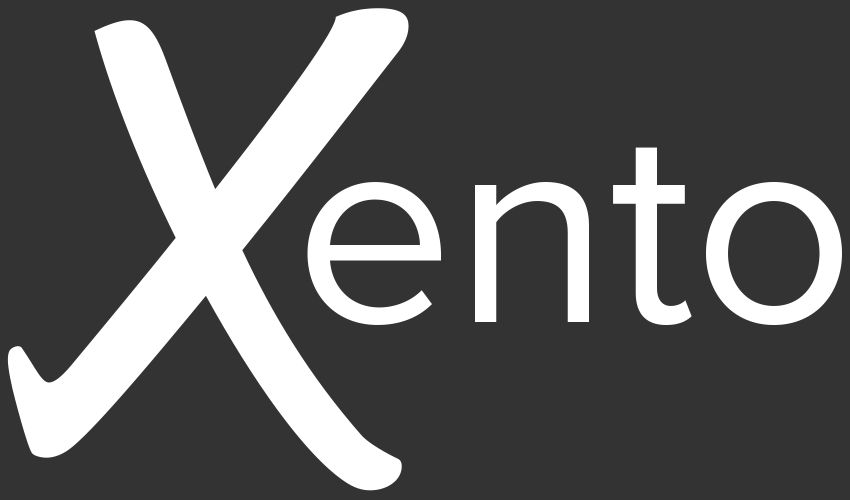
<style>
.page{position:relative;width:850px;height:500px;background:#333333}
.page>*{position:absolute;margin:0}
.t1{font:615.7px "Feltro-Normal";color:#ffffff}
.t2{font:283.5px "ProximaNova-Regular";color:#ffffff}
</style>
<div class="page">
<p class="t1" style="left:7px;top:8px;width:402px;height:483px">X</p>
<p class="t2" style="left:307px;top:147px;width:535px;height:178px">ento</p>
</div>
